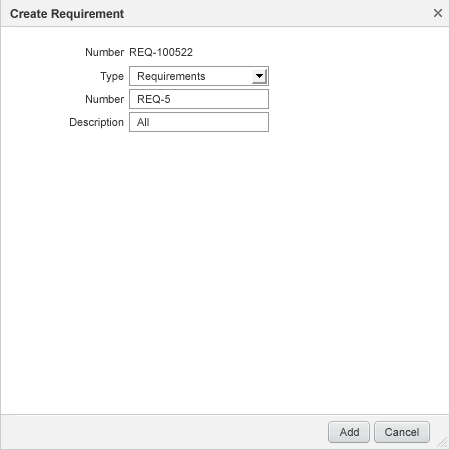
<style>
.page{position:relative;width:450px;height:450px;background:#ffffff}
.page>*{position:absolute;margin:0}
.t1{font:12px "Arial-BoldMT";color:#333333}
.t2{font:11px "ArialMT";color:#333333}
.t3{font:11px "ArialMT";letter-spacing:0.005em;color:#333333}
</style>
<div class="page">
<p class="t1" style="left:10px;top:9px;width:114px;height:12px">Create Requirement</p>
<p class="t2" style="left:86px;top:48px;width:39px;height:8px">Number</p>
<p class="t2" style="left:130px;top:48px;width:63px;height:9px">REQ-100522</p>
<p class="t2" style="left:100px;top:72px;width:24px;height:11px">Type</p>
<p class="t2" style="left:138px;top:72px;width:67px;height:11px">Requirements</p>
<p class="t2" style="left:86px;top:95px;width:39px;height:8px">Number</p>
<p class="t2" style="left:138px;top:95px;width:32px;height:9px">REQ-5</p>
<p class="t2" style="left:70px;top:118px;width:54px;height:11px">Description</p>
<p class="t2" style="left:137px;top:118px;width:12px;height:8px">All</p>
<p class="t3" style="left:339px;top:428px;width:20px;height:8px">Add</p>
<p class="t3" style="left:385px;top:428px;width:34px;height:8px">Cancel</p>
</div>
